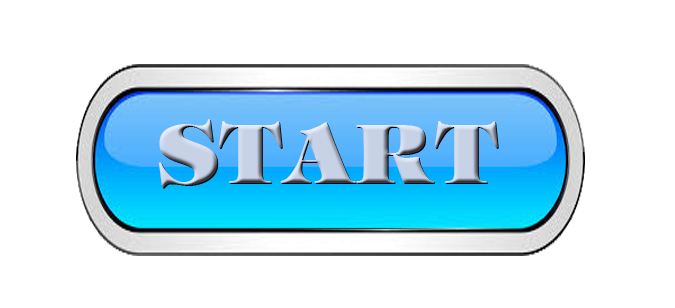
<style>
.page{position:relative;width:675px;height:308px;background:#ffffff}
.page>*{position:absolute;margin:0}
.t1{font:80px "VNT-TimpaniHeavyNormal";color:#c8d2e6}
</style>
<div class="page">
<p class="t1" style="left:159px;top:119px;width:339px;height:69px">START</p>
</div>
